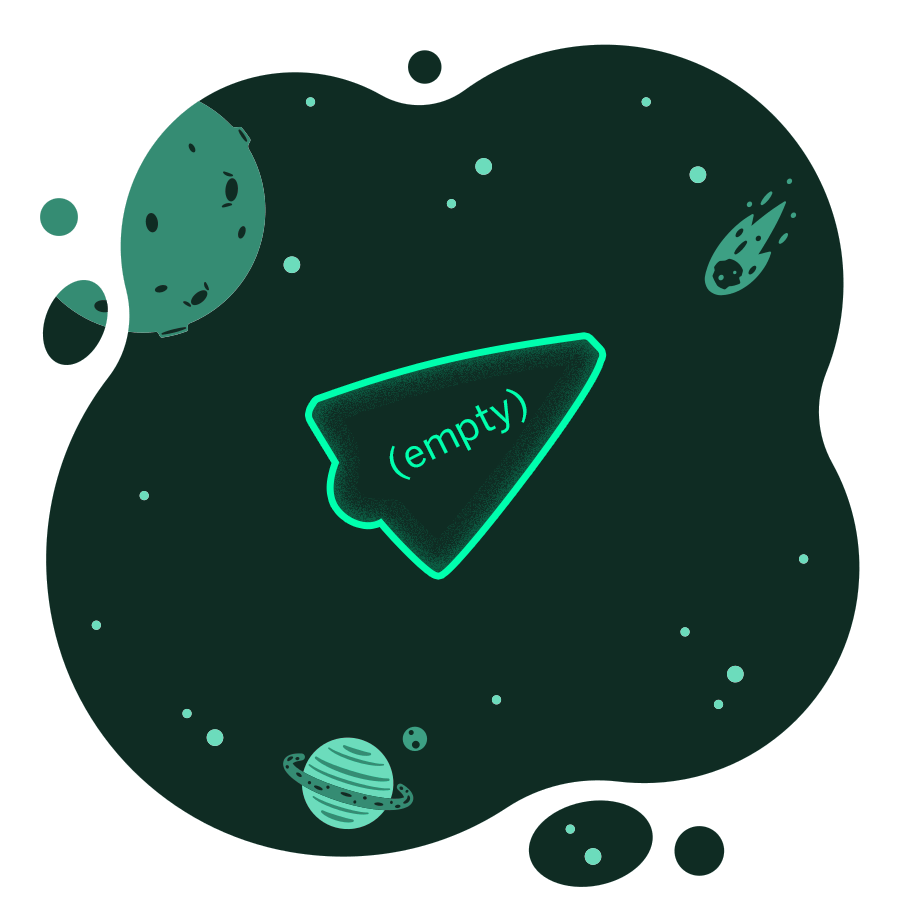
<style>
.page{position:relative;width:912px;height:912px;background:#0f2c23}
.page>*{position:absolute;margin:0}
.t1{font:39.5px "BentonSans";letter-spacing:0.01em;color:#00ffae}
</style>
<div class="page">
<p class="t1" style="left:389px;top:388px;width:138px;height:92px;rotate:-27deg">(empty)</p>
</div>
